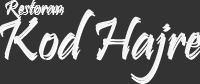
<style>
.page{position:relative;width:200px;height:84px;background:#333333}
.page>*{position:absolute;margin:0}
.t1{font:20.5px "Pristina-Regular";color:#fefefe}
.t2{font:20px "Pristina-Regular";color:#f2f2f2}
.t3{font:57.8px "Pristina-Regular";color:#ffffff}
.t4{font:57.5px "Pristina-Regular";color:#f2f2f2}
</style>
<div class="page">
<p class="t1" style="left:5px;top:1px;width:60px;height:18px">Restoran</p>
<p class="t2" style="left:5px;top:0px;width:58px;height:17px">Restoran</p>
<p class="t3" style="left:0px;top:12px;width:202px;height:72px">Kod Hajre</p>
<p class="t4" style="left:0px;top:9px;width:200px;height:72px">Kod Hajre</p>
</div>
